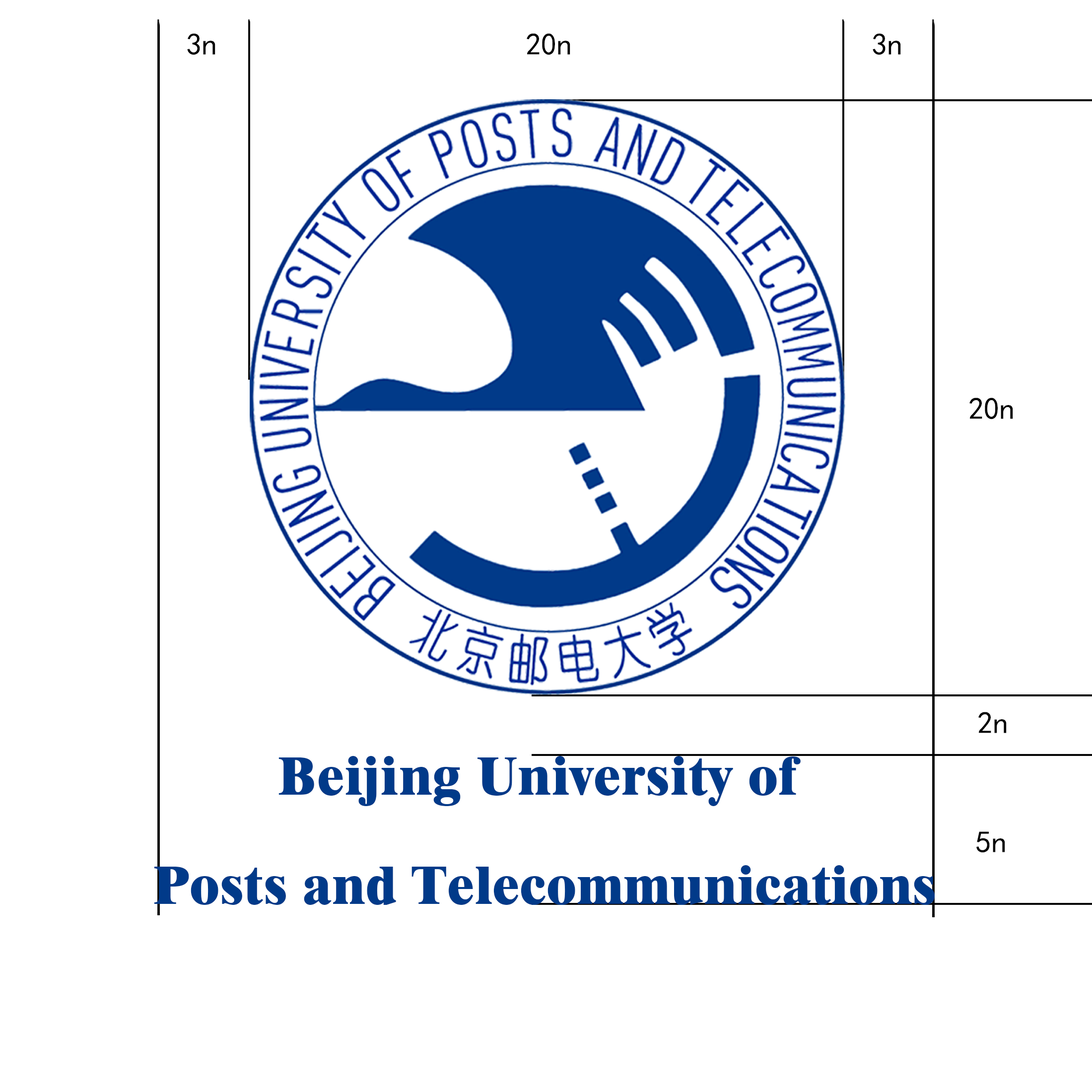
<style>
.page{position:relative;width:1092px;height:1092px;background:#ffffff}
.page>*{position:absolute;margin:0}
.t1{font:30.8px "SimHei";color:#000000}
.t2{font:54.6px/109.2px "Dutch801BT-ExtraBold";letter-spacing:0.002em;color:#013a89}
.t3{font:54.6px/109.2px "Dutch801BT-ExtraBold";letter-spacing:0.008em;color:#013a89}
</style>
<div class="page">
<p class="t1" style="left:187px;top:33px;width:28px;height:22px">3n</p>
<p class="t1" style="left:527px;top:33px;width:43px;height:22px">20n</p>
<p class="t1" style="left:873px;top:33px;width:28px;height:22px">3n</p>
<p class="t1" style="left:969px;top:398px;width:44px;height:21px">20n</p>
<p class="t1" style="left:978px;top:712px;width:29px;height:21px">2n</p>
<p class="t2" style="left:154px;top:756px;width:781px;height:149px;text-align:center"><span class="t3">Beijing University of</span> <br>Posts and Telecommunications</p>
<p class="t1" style="left:976px;top:831px;width:29px;height:22px">5n</p>
</div>
